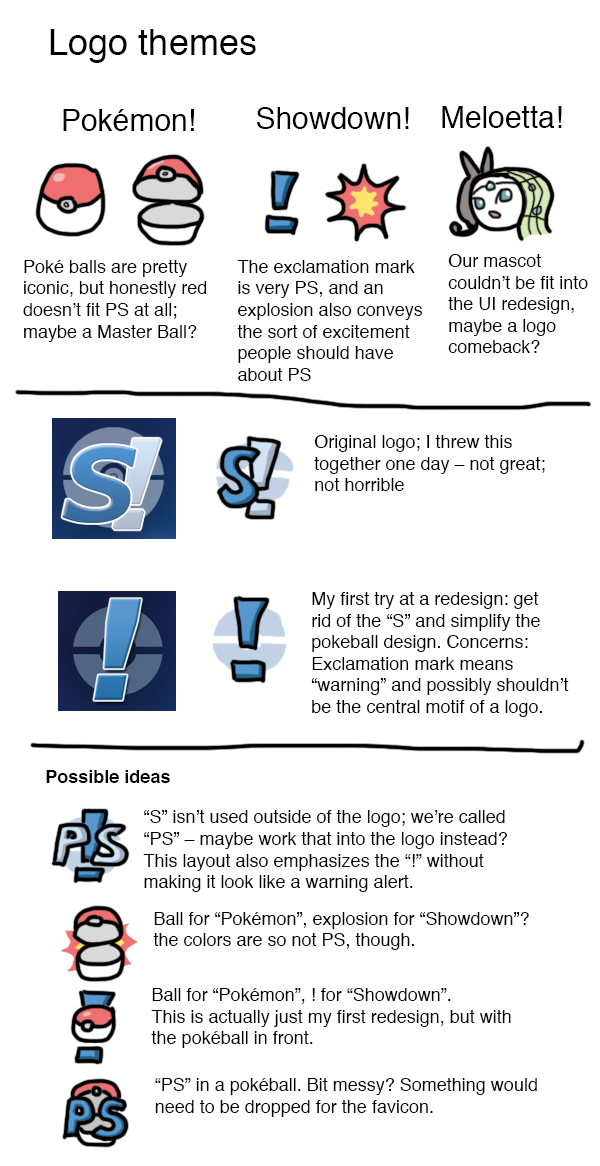
<style>
.page{position:relative;width:600px;height:1166px;background:#ffffff}
.page>*{position:absolute;margin:0}
.t1{font:36px "Helvetica";color:#000000}
.t2{font:30px "Helvetica";color:#000000}
.t3{font:18px "Helvetica";color:#000000}
.t4{font:18px "Helvetica-Bold";color:#000000}
</style>
<div class="page">
<p class="t1" style="left:50px;top:29px;width:206px;height:34px">Logo themes</p>
<p class="t2" style="left:63px;top:109px;width:131px;height:22px">Pokémon!</p>
<p class="t2" style="left:257px;top:107px;width:152px;height:22px">Showdown!</p>
<p class="t2" style="left:442px;top:106px;width:120px;height:22px">Meloetta!</p>
<p class="t3" style="left:448px;top:254px;width:140px;height:99px">Our mascot<br>couldn’t be fit into<br>the UI redesign,<br>maybe a logo<br>comeback?</p>
<p class="t3" style="left:23px;top:260px;width:184px;height:82px">Poké balls are pretty<br>iconic, but honestly red<br>doesn’t fit PS at all;<br>maybe a Master Ball?</p>
<p class="t3" style="left:237px;top:260px;width:185px;height:121px">The exclamation mark<br>is very PS, and an<br>explosion also conveys<br>the sort of excitement<br>people should have<br>about PS</p>
<p class="t3" style="left:314px;top:435px;width:231px;height:56px">Original logo; I threw this<br>together one day – not great;<br>not horrible</p>
<p class="t3" style="left:311px;top:592px;width:258px;height:125px">My first try at a redesign: get<br>rid of the “S” and simplify the<br>pokeball design. Concerns:<br>Exclamation mark means<br>“warning” and possibly shouldn’t<br>be the central motif of a logo.</p>
<p class="t4" style="left:46px;top:770px;width:124px;height:13px">Possible ideas</p>
<p class="t3" style="left:143px;top:810px;width:365px;height:82px">“S” isn’t used outside of the logo; we’re called<br>“PS” – maybe work that into the logo instead?<br>This layout also emphasizes the “!” without<br>making it look like a warning alert.</p>
<p class="t3" style="left:153px;top:912px;width:376px;height:38px">Ball for “Pokémon”, explosion for “Showdown”?<br>the colors are so not PS, though.</p>
<p class="t3" style="left:151px;top:988px;width:360px;height:60px">Ball for “Pokémon”, ! for “Showdown”.<br>This is actually just my first redesign, but with<br>the pokéball in front.</p>
<p class="t3" style="left:155px;top:1078px;width:382px;height:39px">“PS” in a pokéball. Bit messy? Something would<br>need to be dropped for the favicon.</p>
</div>
